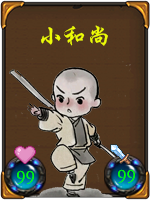
<style>
.page{position:relative;width:150px;height:200px}
.page>*{position:absolute;margin:0}
.t1{font:24px "STXingkaiSC-Bold";color:#ecfa06}
.t2{font:20px "STSong";color:#00ff00}
</style>
<div class="page">
<p class="t1" style="left:41px;top:25px;width:67px;height:21px">小和尚</p>
<p class="t2" style="left:17px;top:170px;width:17px;height:15px">99</p>
<p class="t2" style="left:118px;top:169px;width:17px;height:15px">99</p>
</div>
